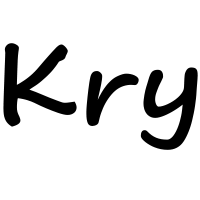
<style>
.page{position:relative;width:200px;height:200px;background:#ffffff}
.page>*{position:absolute;margin:0}
.t1{font:110px "SegoeScript-Bold";color:#000000}
</style>
<div class="page">
<p class="t1" style="left:3px;top:43px;width:195px;height:107px">Kry</p>
</div>
